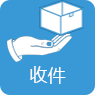
<style>
.page{position:relative;width:95px;height:95px;background:#3998d6}
.page>*{position:absolute;margin:0}
.t1{font:18px "MicrosoftYaHei";color:#ffffff}
</style>
<div class="page">
<p class="t1" style="left:30px;top:66px;width:36px;height:18px">收件</p>
</div>
